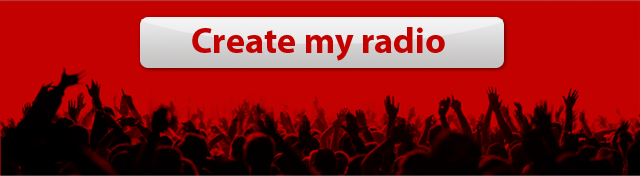
<style>
.page{position:relative;width:640px;height:176px;background:#c40101}
.page>*{position:absolute;margin:0}
.t1{font:36px "MyriadPro-Bold";color:#c40101}
</style>
<div class="page">
<p class="t1" style="left:192px;top:27px;width:253px;height:34px">Create my radio</p>
</div>
